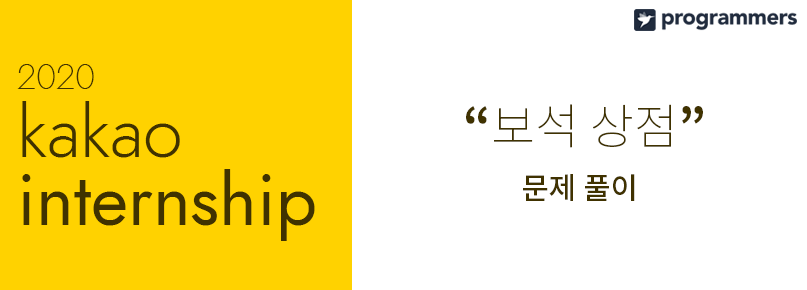
<style>
.page{position:relative;width:807px;height:290px;background:#ffffff}
.page>*{position:absolute;margin:0}
.t1{font:72px/68px "Jost-Book";color:#403200}
.t2{font:36px/68px "Jost-Thin";color:#403200}
.t3{font:72px/68px "Jost-Light";color:#403200}
.t4{font:48px "NotoSansKR-Thin";color:#403200}
.t5{font:48px "NotoSansKR-Bold";color:#403200}
.t6{font:30px "NotoSansKR-Medium";color:#403200}
</style>
<div class="page">
<p class="t1" style="left:17px;top:64px;width:298px;height:177px"><span class="t2">2020<br></span><span class="t3">kakao<br></span>internship</p>
<p class="t4" style="left:466px;top:104px;width:237px;height:44px"><span class="t5">“</span>보석 상점<span class="t5">”</span></p>
<p class="t6" style="left:523px;top:174px;width:112px;height:27px">문제 풀이</p>
</div>
